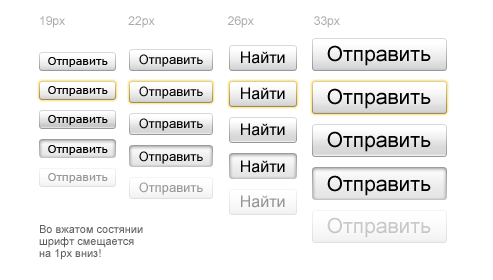
<style>
.page{position:relative;width:493px;height:280px;background:#ffffff}
.page>*{position:absolute;margin:0}
.t1{font:12px "ArialMT";color:#a9a9a9}
.t2{font:13px "ArialMT";color:#000000}
.t3{font:16px "ArialMT";color:#000000}
.t4{font:21px "ArialMT";color:#000000}
.t5{font:11px "Verdana";color:#000000}
.t6{font:11px "Verdana";color:#979797}
.t7{font:13px "ArialMT";color:#969696}
.t8{font:16px "ArialMT";color:#969696}
.t9{font:21px "ArialMT";color:#c8c8c8}
.t10{font:11px/10px "ArialMT";color:#605f5f}
</style>
<div class="page">
<p class="t1" style="left:40px;top:16px;width:300px;height:12px">19px                   22px                      26px                  33px</p>
<p class="t2" style="left:139px;top:54px;width:64px;height:13px">Отправить</p>
<p class="t3" style="left:241px;top:51px;width:44px;height:13px">Найти</p>
<p class="t4" style="left:327px;top:45px;width:104px;height:21px">Отправить</p>
<p class="t5" style="left:48px;top:57px;width:60px;height:10px">Отправить</p>
<p class="t5" style="left:48px;top:86px;width:60px;height:10px">Отправить</p>
<p class="t2" style="left:139px;top:86px;width:64px;height:13px">Отправить</p>
<p class="t3" style="left:241px;top:87px;width:44px;height:13px">Найти</p>
<p class="t5" style="left:48px;top:115px;width:60px;height:10px">Отправить</p>
<p class="t2" style="left:139px;top:118px;width:64px;height:13px">Отправить</p>
<p class="t3" style="left:241px;top:123px;width:44px;height:13px">Найти</p>
<p class="t4" style="left:327px;top:131px;width:104px;height:21px">Отправить</p>
<p class="t5" style="left:48px;top:145px;width:60px;height:10px">Отправить</p>
<p class="t2" style="left:139px;top:151px;width:64px;height:13px">Отправить</p>
<p class="t3" style="left:241px;top:160px;width:44px;height:13px">Найти</p>
<p class="t6" style="left:48px;top:173px;width:60px;height:10px">Отправить</p>
<p class="t7" style="left:139px;top:182px;width:64px;height:13px">Отправить</p>
<p class="t4" style="left:327px;top:175px;width:104px;height:21px">Отправить</p>
<p class="t8" style="left:241px;top:195px;width:44px;height:13px">Найти</p>
<p class="t9" style="left:327px;top:217px;width:104px;height:21px">Отправить</p>
<p class="t10" style="left:39px;top:225px;width:104px;height:35px">Во вжатом состянии<br>шрифт смещается<br>на 1px вниз!</p>
</div>
